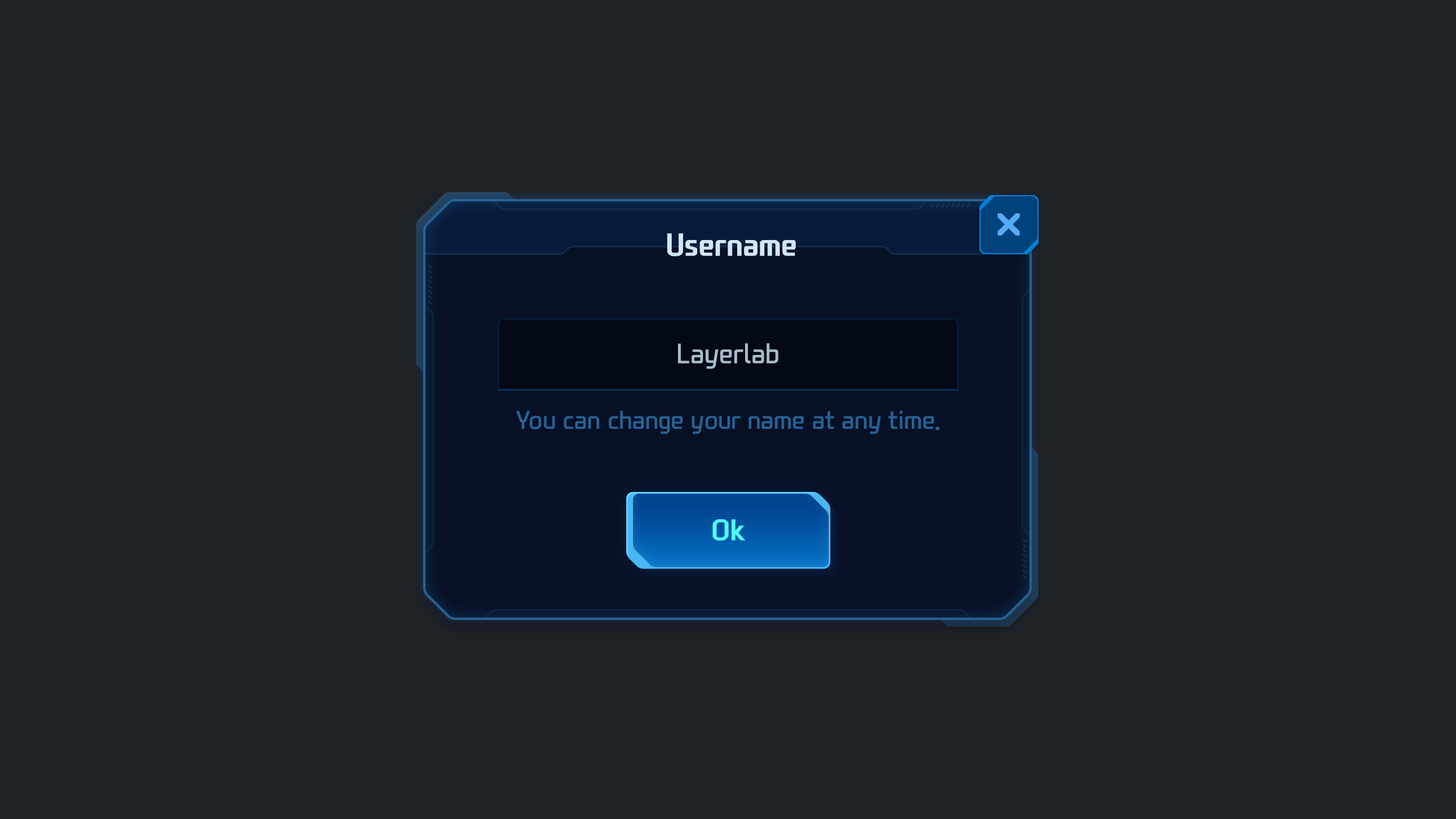
<style>
.page{position:relative;width:1456px;height:819px;background:#1e2227}
.page>*{position:absolute;margin:0}
.t1{font:30.7px "NEXONFootballGothicB";color:#cfe7f7}
.t2{font:27.3px "NEXONFootballGothicL";color:#a7bbca}
.t3{font:25px "NEXONFootballGothicL";color:#266395}
.t4{font:28.4px "NEXONFootballGothicB";color:#4efefe}
</style>
<div class="page">
<p class="t1" style="left:667px;top:233px;width:129px;height:24px">Username</p>
<p class="t2" style="left:678px;top:343px;width:101px;height:26px">Layerlab</p>
<p class="t3" style="left:516px;top:411px;width:424px;height:23px">You can change your name at any time.</p>
<p class="t4" style="left:713px;top:519px;width:33px;height:22px">Ok</p>
</div>
